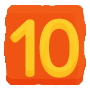
<style>
.page{position:relative;width:90px;height:90px;background:#f05413}
.page>*{position:absolute;margin:0}
.t1{font:82px "Fredoka-Medium";letter-spacing:-0.005em;color:#fdc921;scale:0.94 1}
</style>
<div class="page">
<p class="t1" style="left:10px;top:18px;width:69px;height:60px">10</p>
</div>
